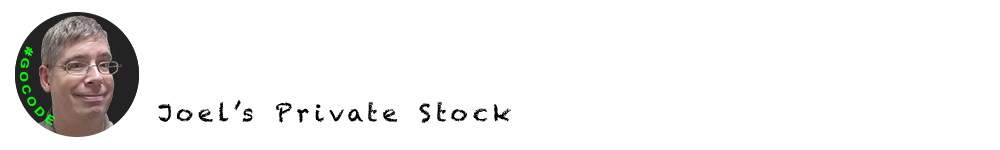
<style>
.page{position:relative;width:1000px;height:150px;background:#ffffff}
.page>*{position:absolute;margin:0}
.t1{font:11.2px "Arial-BoldMT";letter-spacing:0.2em;color:#00ff00}
.t2{font:24px "Chalkduster";letter-spacing:0.2em;color:#000000}
</style>
<div class="page">
<p class="t1" style="left:19px;top:46px;width:37px;height:80px;rotate:72deg">#GOCODE</p>
<p class="t2" style="left:158px;top:100px;width:353px;height:23px">Joel’s Private Stock</p>
</div>
